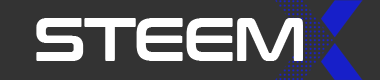
<style>
.page{position:relative;width:380px;height:80px;background:#333333}
.page>*{position:absolute;margin:0}
.t1{font:61.3px "ConthraxSb-Regular";letter-spacing:-0.05em;color:#ffffff}
</style>
<div class="page">
<p class="t1" style="left:36px;top:18px;width:267px;height:43px">STEEM</p>
</div>
